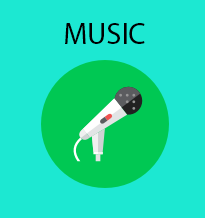
<style>
.page{position:relative;width:205px;height:218px;background:#1ce8d2}
.page>*{position:absolute;margin:0}
.t1{font:30px "MyriadPro-Regular";color:#000000}
</style>
<div class="page">
<p class="t1" style="left:65px;top:23px;width:80px;height:21px">MUSIC</p>
</div>
